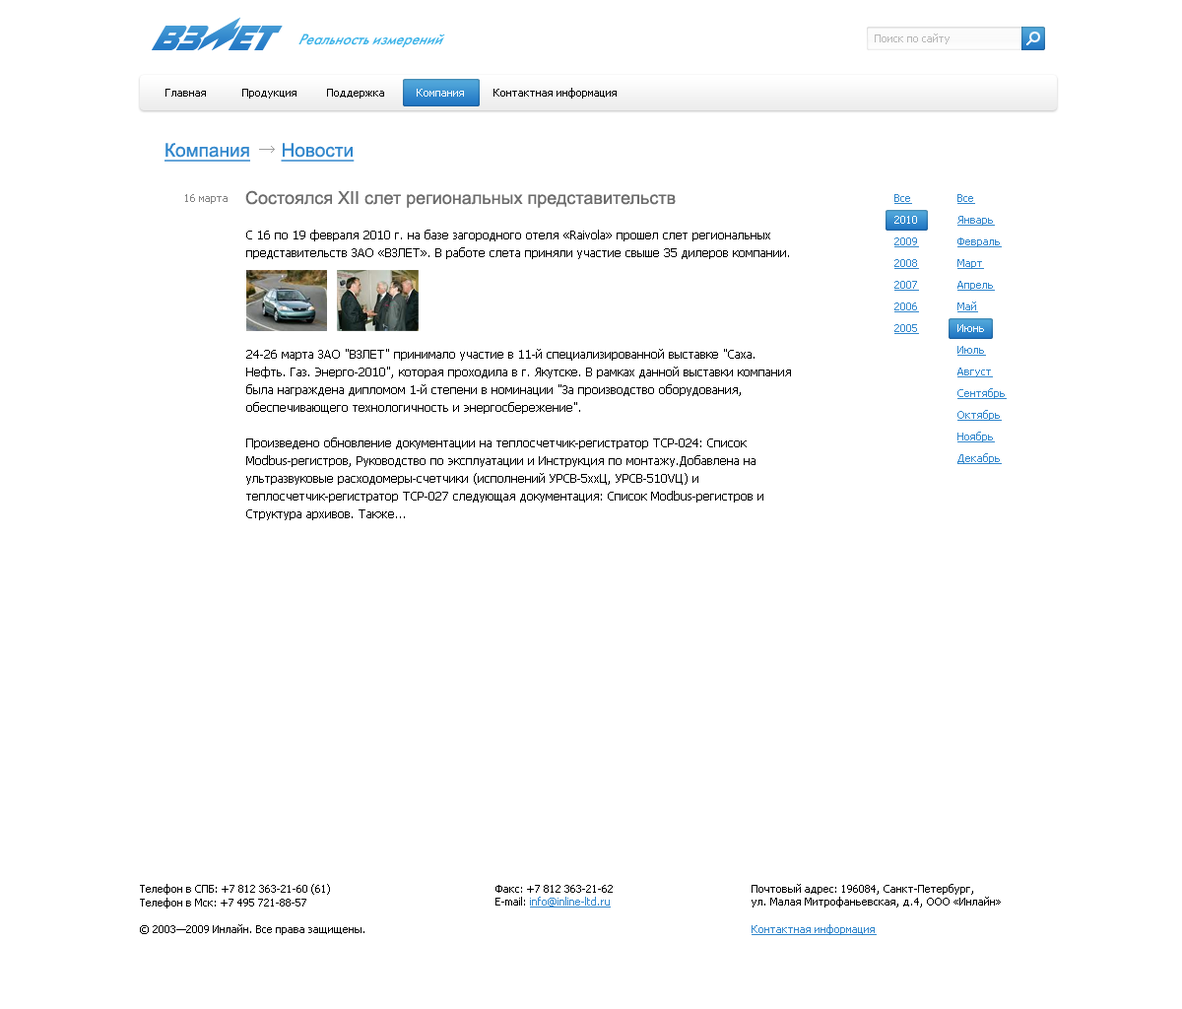
<style>
.page{position:relative;width:1182px;height:1009px;background:#ffffff}
.page>*{position:absolute;margin:0}
.t1{font:15.7px "FuturisC-Italic";color:#3cb3e8;scale:0.94 1}
.t2{font:10.8px "Tahoma";color:#b7b6b6}
.t3{font:10.8px "Tahoma";color:#000000}
.t4{font:10.8px "Tahoma";color:#ffffff}
.t5{font:18.7px "ArialMT";color:#3287cc;text-decoration:underline}
.t6{font:10.8px "Tahoma";color:#838383}
.t7{font:17.7px "ArialMT";color:#6b6b6b}
.t8{font:10.8px/21.7px "Tahoma";color:#3287cc;text-decoration:underline}
.t9{font:10.8px/21.7px "Tahoma";color:#ffffff}
.t10{font:11.8px/17.7px "Tahoma";color:#000000}
.t11{font:14.8px "Arial-BoldMT";color:#000000}
.t12{font:10.8px "Tahoma";color:#3287cc;text-decoration:underline}
</style>
<div class="page">
<p class="t1" style="left:298px;top:33px;width:147px;height:14px">Реальность измерений</p>
<p class="t2" style="left:875px;top:33px;width:75px;height:11px">Поиск по сайту</p>
<p class="t3" style="left:165px;top:89px;width:41px;height:8px">Главная</p>
<p class="t3" style="left:242px;top:89px;width:55px;height:10px">Продукция</p>
<p class="t3" style="left:327px;top:89px;width:57px;height:10px">Поддержка</p>
<p class="t4" style="left:417px;top:89px;width:47px;height:8px">Компания</p>
<p class="t3" style="left:494px;top:88px;width:123px;height:11px">Контактная информация</p>
<p class="t5" style="left:165px;top:143px;width:190px;height:19px">Компания      Новости</p>
<p class="t6" style="left:185px;top:194px;width:43px;height:10px">16 марта</p>
<p class="t7" style="left:245px;top:190px;width:431px;height:18px">Состоялся XII слет региональных представительств</p>
<p class="t8" style="left:894px;top:194px;width:25px;height:140px">Все<br><span class="t9">2010<br></span>2009<br>2008<br>2007<br>2006<br>2005</p>
<p class="t8" style="left:958px;top:194px;width:49px;height:270px">Все<br>Январь<br>Февраль<br>Март<br>Апрель<br>Май<br><span class="t9">Июнь<br></span>Июль<br>Август<br>Сентябрь<br>Октябрь<br>Ноябрь<br>Декабрь</p>
<p class="t10" style="left:246px;top:230px;width:543px;height:29px">С 16 по 19 февраля 2010 г. на базе загородного отеля «Raivola» прошел слет региональных представительств ЗАО «ВЗЛЕТ». В работе слета приняли участие свыше 35 дилеров компании.</p>
<p class="t10" style="left:246px;top:349px;width:545px;height:171px">24-26 марта ЗАО "ВЗЛЕТ" принимало участие в 11-й специализированной выставке "Саха. Нефть. Газ. Энерго-2010", которая проходила в г. Якутске. В рамках данной выставки компания была награждена дипломом 1-й степени в номинации "За производство оборудования, обеспечивающего технологичность и энергосбережение".<br><br>Произведено обновление документации на теплосчетчик-регистратор ТСР-024: Список Modbus-регистров, Руководство по эксплуатации и Инструкция по монтажу.Добавлена на ультразвуковые расходомеры-счетчики (исполнений УРСВ-5ххЦ, УРСВ-510VЦ) и теплосчетчик-регистратор ТСР-027 следующая документация: Список Modbus-регистров и Структура архивов. Также...</p>
<p class="t3" style="left:140px;top:884px;width:190px;height:24px">Телефон в СПБ: +7 812 363-21-60 (61)<br>Телефон в Мск: +7 495 721-88-57</p>
<p class="t3" style="left:496px;top:885px;width:117px;height:22px"><span class="t11"><br><br></span>Факс: +7 812 363-21-62<br>E-mail: <span class="t12">info@inline-ltd.ru</span></p>
<p class="t3" style="left:752px;top:884px;width:249px;height:23px"><span class="t11"><br><br></span>Почтовый адрес: 196084, Санкт-Петербург,<br>ул. Малая Митрофаньевская, д.4, ООО «Инлайн»</p>
<p class="t3" style="left:140px;top:924px;width:224px;height:11px">© 2003—2009 Инлайн. Все права защищены.</p>
<p class="t12" style="left:752px;top:924px;width:125px;height:11px">Контактная информация</p>
</div>
